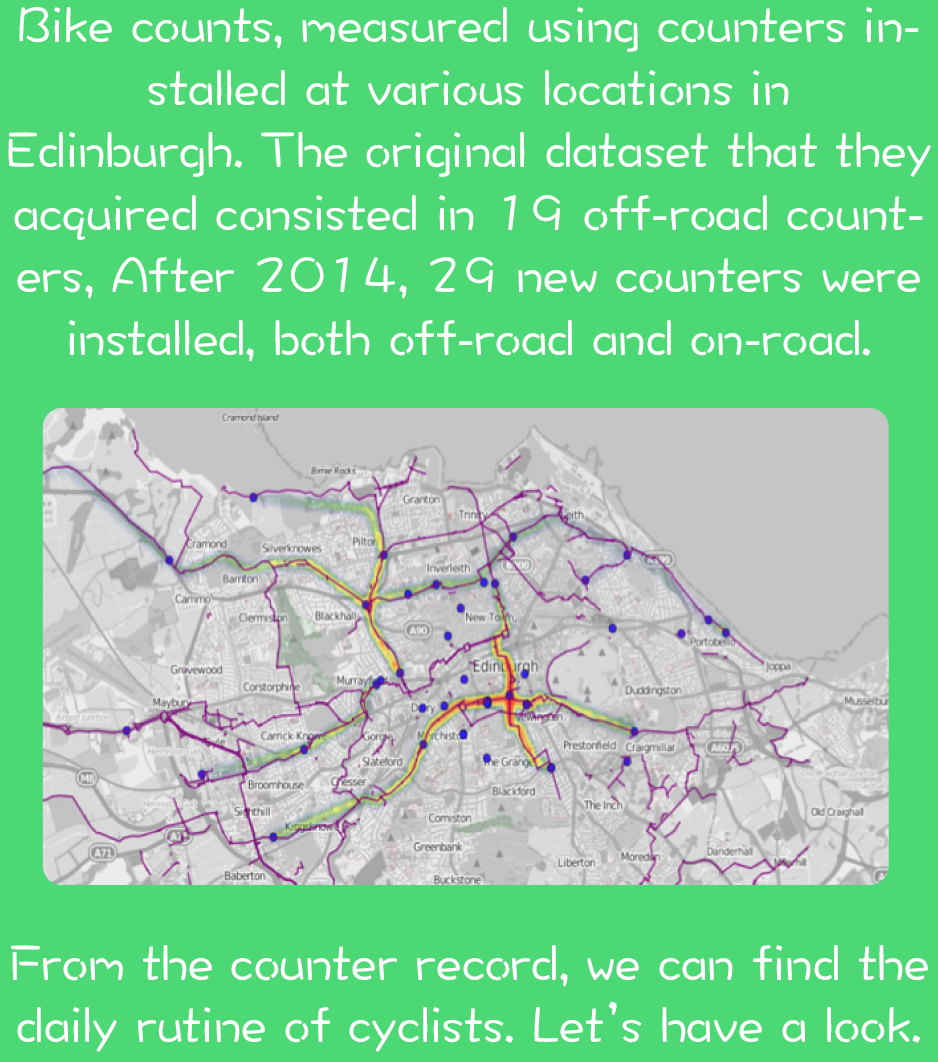
<style>
.page{position:relative;width:938px;height:1062px;background:#4cd875}
.page>*{position:absolute;margin:0}
.t1{font:52.1px "DFWaWaSC-W5";color:#ffffff}
</style>
<div class="page">
<p class="t1" style="left:8px;top:7px;width:923px;height:1045px;text-align:center">Bike counts, measured using counters installed at various locations in<br>Edinburgh. The original dataset that they acquired consisted in 19 off-road counters, After 2014, 29 new counters were<br>installed, both off-road and on-road.<br><br><br><br><br><br><br><br><br><br>From the counter record, we can find the daily rutine of cyclists. Let’s have a look.</p>
</div>
